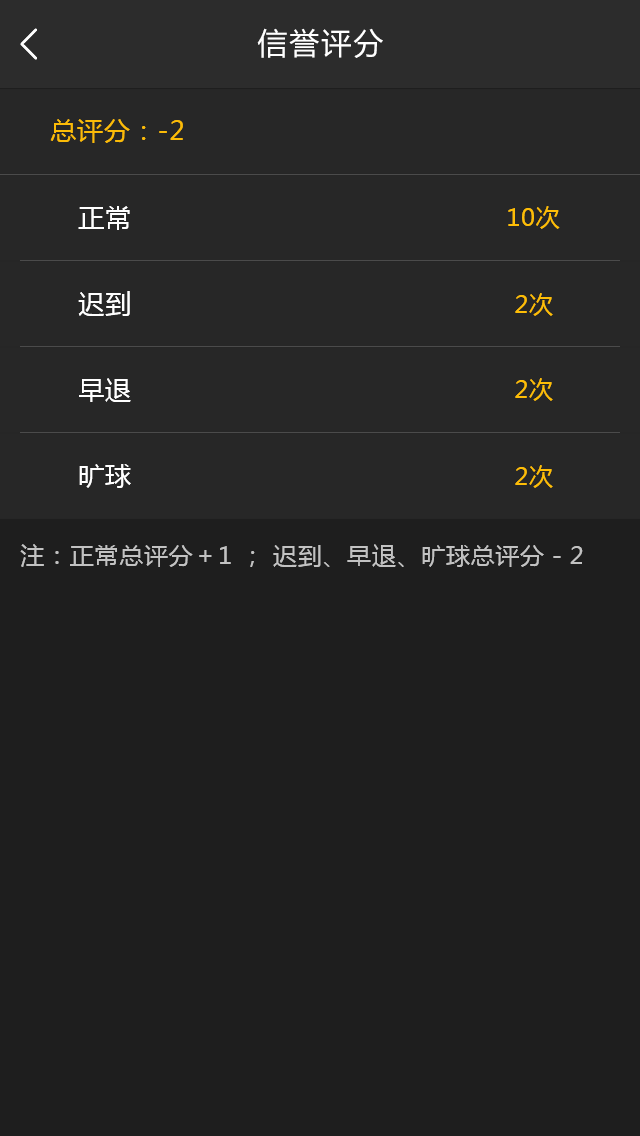
<style>
.page{position:relative;width:640px;height:1136px;background:#1e1e1e}
.page>*{position:absolute;margin:0}
.t1{font:30px "MicrosoftYaHei";letter-spacing:0.07em;color:#ffffff}
.t2{font:26px "MicrosoftYaHei";letter-spacing:0.03em;color:#fbbb07}
.t3{font:26px "MicrosoftYaHei";letter-spacing:0.03em;color:#ffffff}
.t4{font:24px "MicrosoftYaHei";letter-spacing:0.03em;color:#fdbd06}
.t5{font:24px "MicrosoftYaHei";letter-spacing:0.03em;color:#c2c2c2}
</style>
<div class="page">
<p class="t1" style="left:257px;top:28px;width:126px;height:30px">信誉评分</p>
<p class="t2" style="left:50px;top:119px;width:133px;height:24px">总评分：-2</p>
<p class="t3" style="left:78px;top:206px;width:52px;height:24px">正常</p>
<p class="t4" style="left:508px;top:206px;width:52px;height:23px">10次</p>
<p class="t3" style="left:78px;top:291px;width:52px;height:25px">迟到</p>
<p class="t4" style="left:515px;top:293px;width:38px;height:23px">2次</p>
<p class="t3" style="left:79px;top:378px;width:52px;height:24px">早退</p>
<p class="t4" style="left:515px;top:378px;width:38px;height:23px">2次</p>
<p class="t3" style="left:79px;top:464px;width:52px;height:24px">旷球</p>
<p class="t4" style="left:515px;top:465px;width:38px;height:23px">2次</p>
<p class="t5" style="left:20px;top:544px;width:563px;height:23px">注：正常总评分＋1 ； 迟到、早退、旷球总评分－2</p>
</div>
